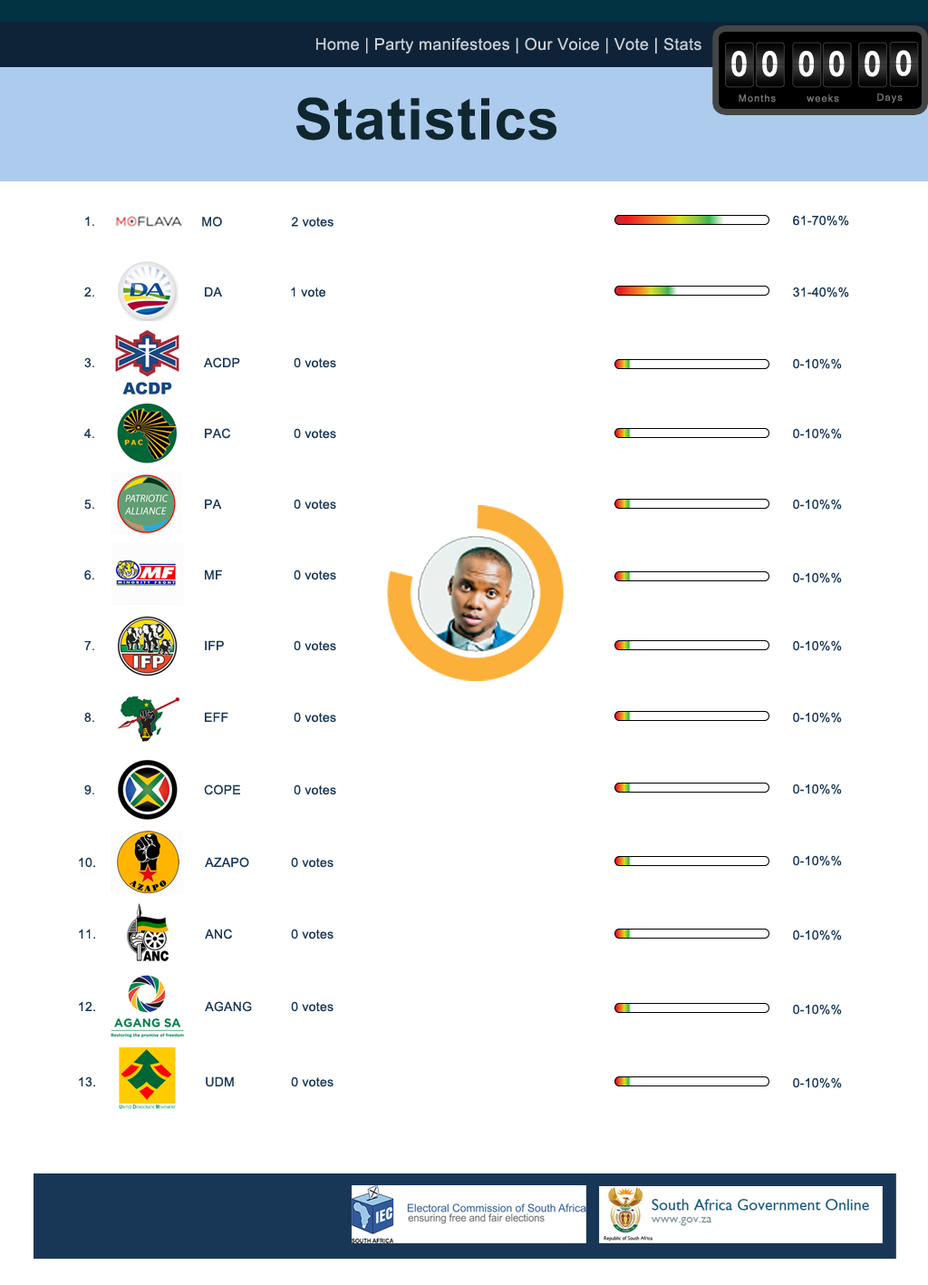
<style>
.page{position:relative;width:928px;height:1285px;background:#ffffff}
.page>*{position:absolute;margin:0}
.t1{font:16.3px "ArialMT";letter-spacing:0.02em;color:#c9ced5}
.t2{font:34.1px "Kartika-Bold";letter-spacing:0.105em;color:#ffffff;scale:0.88 1}
.t3{font:57.3px "Arial-BoldMT";letter-spacing:0.02em;color:#102730}
.t4{font:9.6px "Kartika";letter-spacing:0.105em;color:#777676}
.t5{font:12.7px "ArialMT";letter-spacing:0.02em;color:#183757}
</style>
<div class="page">
<p class="t1" style="left:316px;top:37px;width:386px;height:16px">Home | Party manifestoes | Our Voice | Vote | Stats</p>
<p class="t2" style="left:732px;top:51px;width:15px;height:26px">0</p>
<p class="t2" style="left:762px;top:51px;width:16px;height:26px">0</p>
<p class="t2" style="left:799px;top:51px;width:15px;height:26px">0</p>
<p class="t2" style="left:829px;top:51px;width:16px;height:26px">0</p>
<p class="t2" style="left:865px;top:51px;width:15px;height:26px">0</p>
<p class="t2" style="left:896px;top:50px;width:16px;height:26px">0</p>
<p class="t3" style="left:296px;top:97px;width:261px;height:44px">Statistics</p>
<p class="t4" style="left:739px;top:94px;width:37px;height:8px">Months</p>
<p class="t4" style="left:807px;top:94px;width:32px;height:8px">weeks</p>
<p class="t4" style="left:878px;top:93px;width:25px;height:10px">Days</p>
<p class="t5" style="left:85px;top:216px;width:9px;height:10px">1.</p>
<p class="t5" style="left:202px;top:217px;width:132px;height:10px">MO       2 votes</p>
<p class="t5" style="left:793px;top:215px;width:56px;height:11px">61-70%%</p>
<p class="t5" style="left:84px;top:286px;width:241px;height:11px">2.            DA       1 vote</p>
<p class="t5" style="left:793px;top:286px;width:56px;height:11px">31-40%%</p>
<p class="t5" style="left:84px;top:357px;width:252px;height:11px">3.            ACDP       0 votes</p>
<p class="t5" style="left:793px;top:358px;width:49px;height:11px">0-10%%</p>
<p class="t5" style="left:84px;top:428px;width:252px;height:11px">4.            PAC       0 votes</p>
<p class="t5" style="left:793px;top:428px;width:49px;height:11px">0-10%%</p>
<p class="t5" style="left:84px;top:499px;width:252px;height:10px">5.            PA        0 votes</p>
<p class="t5" style="left:793px;top:499px;width:49px;height:10px">0-10%%</p>
<p class="t5" style="left:84px;top:569px;width:252px;height:11px">6.            MF        0 votes</p>
<p class="t5" style="left:793px;top:572px;width:49px;height:11px">0-10%%</p>
<p class="t5" style="left:84px;top:640px;width:252px;height:11px">7.            IFP        0 votes</p>
<p class="t5" style="left:793px;top:640px;width:49px;height:11px">0-10%%</p>
<p class="t5" style="left:84px;top:712px;width:252px;height:11px">8.            EFF        0 votes</p>
<p class="t5" style="left:793px;top:712px;width:49px;height:11px">0-10%%</p>
<p class="t5" style="left:84px;top:784px;width:252px;height:11px">9.            COPE       0 votes</p>
<p class="t5" style="left:793px;top:783px;width:49px;height:11px">0-10%%</p>
<p class="t5" style="left:79px;top:857px;width:255px;height:11px">10.           AZAPO    0 votes</p>
<p class="t5" style="left:793px;top:855px;width:49px;height:11px">0-10%%</p>
<p class="t5" style="left:79px;top:928px;width:255px;height:11px">11.           ANC      0 votes</p>
<p class="t5" style="left:793px;top:929px;width:49px;height:11px">0-10%%</p>
<p class="t5" style="left:79px;top:1001px;width:255px;height:11px">12.           AGANG    0 votes</p>
<p class="t5" style="left:793px;top:1004px;width:49px;height:10px">0-10%%</p>
<p class="t5" style="left:79px;top:1076px;width:255px;height:11px">13.           UDM      0 votes</p>
<p class="t5" style="left:793px;top:1077px;width:49px;height:11px">0-10%%</p>
</div>
